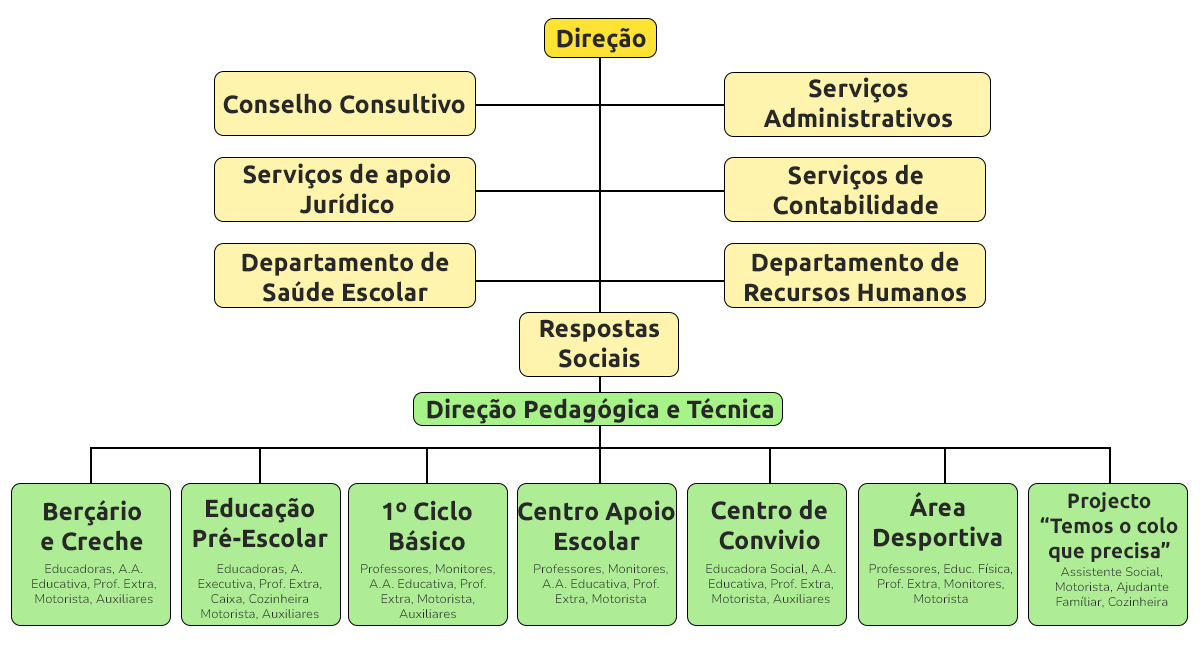
<style>
.page{position:relative;width:1200px;height:654px;background:#ffffff}
.page>*{position:absolute;margin:0}
.t1{font:25px "Ubuntu-Bold";color:#282828}
.t2{font:20.8px "Ubuntu-Bold";color:#282828}
.t3{font:12.5px "NunitoSans10pt-Light";color:#282828}
</style>
<div class="page">
<p class="t1" style="left:557px;top:27px;width:89px;height:26px">Direção</p>
<p class="t1" style="left:763px;top:77px;width:189px;height:51px;text-align:center">Serviços Administrativos</p>
<p class="t1" style="left:223px;top:93px;width:242px;height:21px">Conselho Consultivo</p>
<p class="t1" style="left:243px;top:163px;width:207px;height:51px;text-align:center">Serviços de apoio Jurídico</p>
<p class="t1" style="left:773px;top:164px;width:165px;height:51px;text-align:center">Serviços de Contabilidade</p>
<p class="t1" style="left:242px;top:251px;width:207px;height:51px;text-align:center">Departamento de <br>Saúde Escolar</p>
<p class="t1" style="left:745px;top:251px;width:221px;height:51px;text-align:center">Departamento de <br>Recursos Humanos</p>
<p class="t1" style="left:540px;top:319px;width:119px;height:49px;text-align:center">Respostas <br>Sociais</p>
<p class="t1" style="left:427px;top:398px;width:346px;height:26px">Direção Pedagógica e Técnica</p>
<p class="t1" style="left:193px;top:497px;width:135px;height:51px;text-align:center">Educação<br>Pré-Escolar</p>
<p class="t1" style="left:874px;top:492px;width:128px;height:59px;text-align:center">Área<br>Desportiva</p>
<p class="t2" style="left:1040px;top:492px;width:138px;height:70px;text-align:center">Projecto <br>“Temos o colo <br>que precisa”</p>
<p class="t1" style="left:41px;top:500px;width:102px;height:51px;text-align:center">Berçário<br>e Creche</p>
<p class="t1" style="left:382px;top:500px;width:90px;height:51px;text-align:center">1º Ciclo <br>Básico</p>
<p class="t1" style="left:518px;top:500px;width:157px;height:51px;text-align:center">Centro Apoio<br>Escolar</p>
<p class="t1" style="left:711px;top:499px;width:116px;height:51px;text-align:center">Centro de<br>Convivio</p>
<p class="t3" style="left:32px;top:564px;width:124px;height:41px;text-align:center">Educadoras, A.A.<br>Educativa, Prof. Extra,<br>Motorista, Auxiliares</p>
<p class="t3" style="left:198px;top:564px;width:124px;height:56px;text-align:center">Educadoras, A.<br>Executiva, Prof. Extra, Caixa, Cozinheira<br>Motorista, Auxiliares</p>
<p class="t3" style="left:361px;top:564px;width:134px;height:54px;text-align:center">Professores, Monitores, A.A. Educativa, Prof. <br>Extra, Motorista, Auxiliares</p>
<p class="t3" style="left:534px;top:564px;width:134px;height:41px;text-align:center">Professores, Monitores, A.A. Educativa, Prof. <br>Extra, Motorista</p>
<p class="t3" style="left:706px;top:564px;width:130px;height:41px;text-align:center">Educadora Social, A.A.<br>Educativa, Prof. Extra,<br>Motorista, Auxiliares</p>
<p class="t3" style="left:869px;top:563px;width:143px;height:40px;text-align:center">Professores, Educ. Física, Prof. Extra, Monitores, Motorista</p>
<p class="t3" style="left:1056px;top:567px;width:113px;height:41px;text-align:center">Assistente Social, Motorista, Ajudante Famíliar, Cozinheira</p>
</div>
